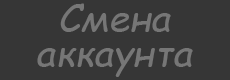
<style>
.page{position:relative;width:230px;height:80px;background:#363636}
.page>*{position:absolute;margin:0}
.t1{font:38.3px/35.1px "ComicSansMS-Italic";letter-spacing:0.001em;color:#767676}
</style>
<div class="page">
<p class="t1" style="left:37px;top:3px;width:156px;height:74px;text-align:center">Смена аккаунта</p>
</div>
